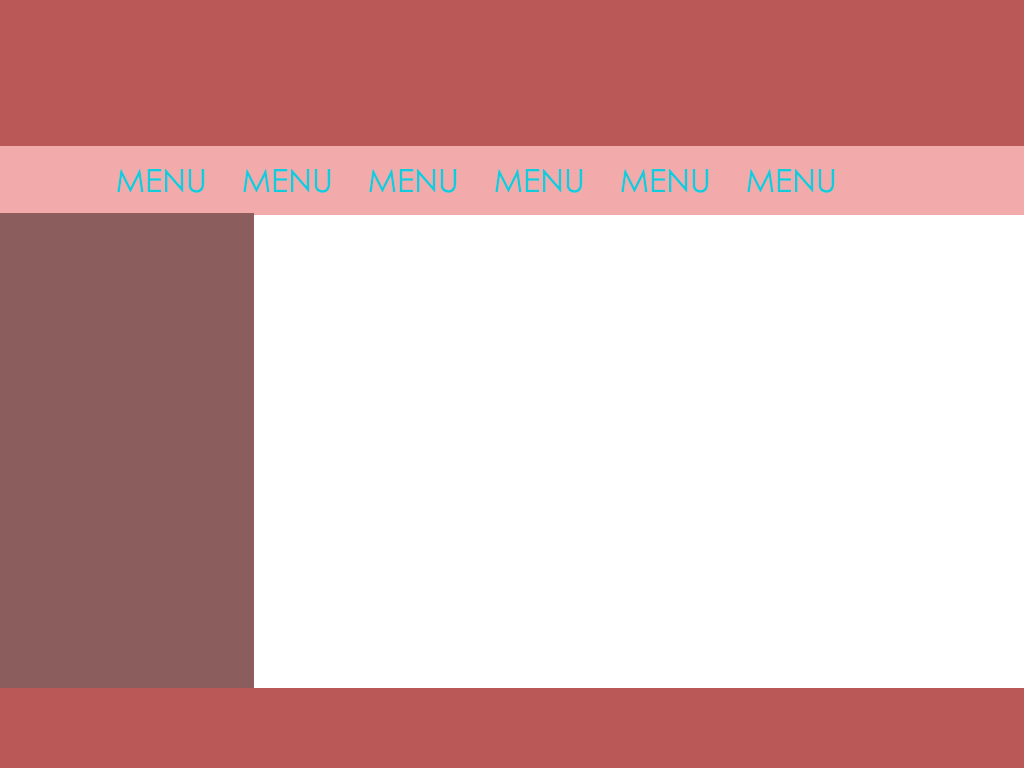
<style>
.page{position:relative;width:1024px;height:768px;background:#ffffff}
.page>*{position:absolute;margin:0}
.t1{font:32px "CenturyGothic";color:#12ccdd;text-transform:uppercase}
</style>
<div class="page">
<p class="t1" style="left:117px;top:169px;width:88px;height:24px">MENU</p>
<p class="t1" style="left:243px;top:169px;width:88px;height:24px">MENU</p>
<p class="t1" style="left:369px;top:169px;width:88px;height:24px">MENU</p>
<p class="t1" style="left:495px;top:169px;width:88px;height:24px">MENU</p>
<p class="t1" style="left:621px;top:169px;width:88px;height:24px">MENU</p>
<p class="t1" style="left:747px;top:169px;width:88px;height:24px">MENU</p>
</div>
